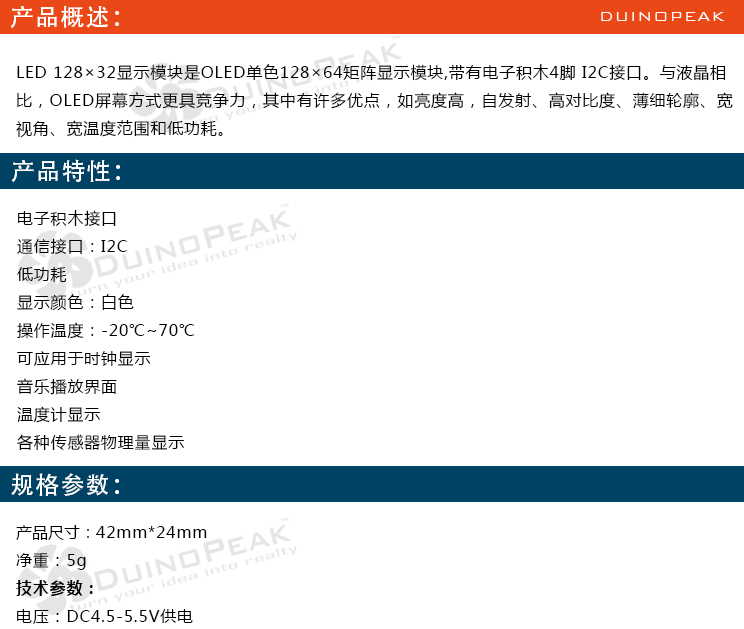
<style>
.page{position:relative;width:744px;height:629px;background:#ffffff}
.page>*{position:absolute;margin:0}
.t1{font:24px "AdobeHeitiStd-Regular";letter-spacing:0.05em;color:#ffffff}
.t2{font:18px "BankGothicBT-Light";letter-spacing:0.05em;color:#ffffff}
.t3{font:16px "MicrosoftYaHei";letter-spacing:0.05em;color:#000000}
.t4{font:16px "MicrosoftYaHei";color:#000000}
.t5{font:16px "MicrosoftYaHei-Bold";letter-spacing:0.05em;color:#000000}
</style>
<div class="page">
<p class="t1" style="left:10px;top:6px;width:109px;height:23px">产品概述：</p>
<p class="t2" style="left:601px;top:12px;width:124px;height:9px">DUINOPEAK</p>
<p class="t3" style="left:16px;top:64px;width:717px;height:73px">LED 128×32显示模块是OLED单色128×64矩阵显示模块,带有电子积木4脚 I2C接口。与液晶相<br>比，OLED屏幕方式更具竞争力，其中有许多优点，如亮度高，自发射、高对比度、薄细轮廓、宽<br>视角、宽温度范围和低功耗。</p>
<p class="t1" style="left:11px;top:159px;width:109px;height:24px">产品特性：</p>
<p class="t3" style="left:17px;top:210px;width:178px;height:241px">电子积木接口<br>通信接口：I2C<br>低功耗<br>显示颜色：白色<br>操作温度：-20℃~70℃<br>可应用于时钟显示<br>音乐播放界面<br>温度计显示<br>各种传感器物理量显示</p>
<p class="t1" style="left:11px;top:473px;width:108px;height:23px">规格参数：</p>
<p class="t3" style="left:16px;top:525px;width:191px;height:99px"><span class="t4">产品尺寸：</span>42mm*24mm<br>净重：5g<br><span class="t5">技术参数：<br></span>电压：DC4.5-5.5V供电</p>
</div>
